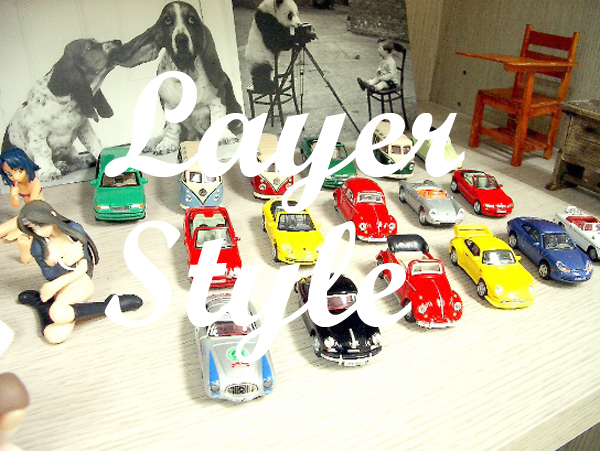
<style>
.page{position:relative;width:600px;height:451px}
.page>*{position:absolute;margin:0}
.t1{font:150px/150px "ScriptMTBold";color:#ffffff}
</style>
<div class="page">
<p class="t1" style="left:104px;top:71px;width:361px;height:292px">Layer<br>Style</p>
</div>
